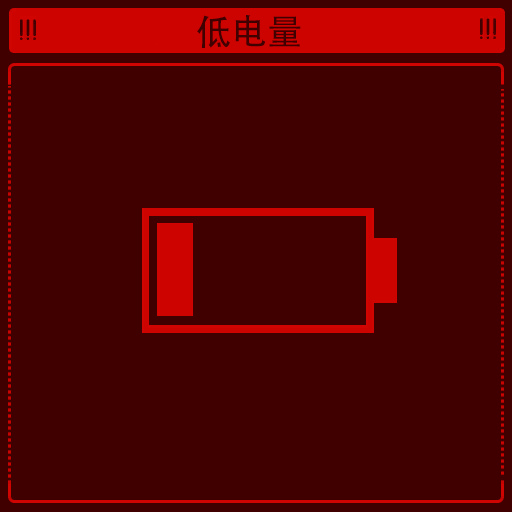
<style>
.page{position:relative;width:512px;height:512px;background:#400000}
.page>*{position:absolute;margin:0}
.t1{font:35.7px "AdobeHeitiStd-Regular";color:#400000}
</style>
<div class="page">
<p class="t1" style="left:197px;top:15px;width:104px;height:33px">低电量</p>
</div>
